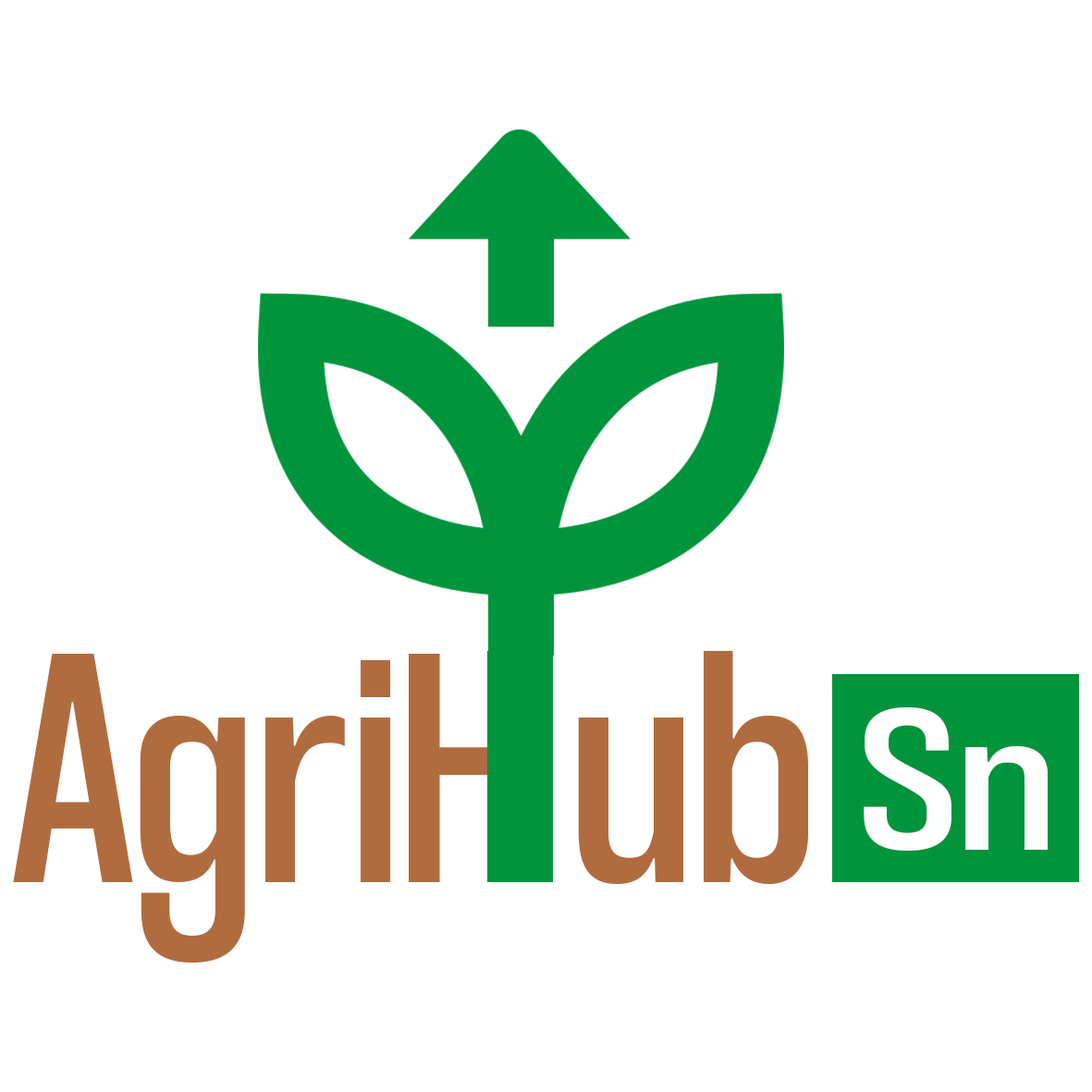
<style>
.page{position:relative;width:1092px;height:1092px;background:#ffffff}
.page>*{position:absolute;margin:0}
.t1{font:343.5px "CoolveticaCondensedRg-Regular";color:#b06c3f}
.t2{font:213.4px "CoolveticaCondensedRg-Regular";color:#ffffff;scale:1.25 1}
</style>
<div class="page">
<p class="t1" style="left:13px;top:651px;width:1035px;height:312px">AgriH ub <span class="t2">Sn</span></p>
</div>
